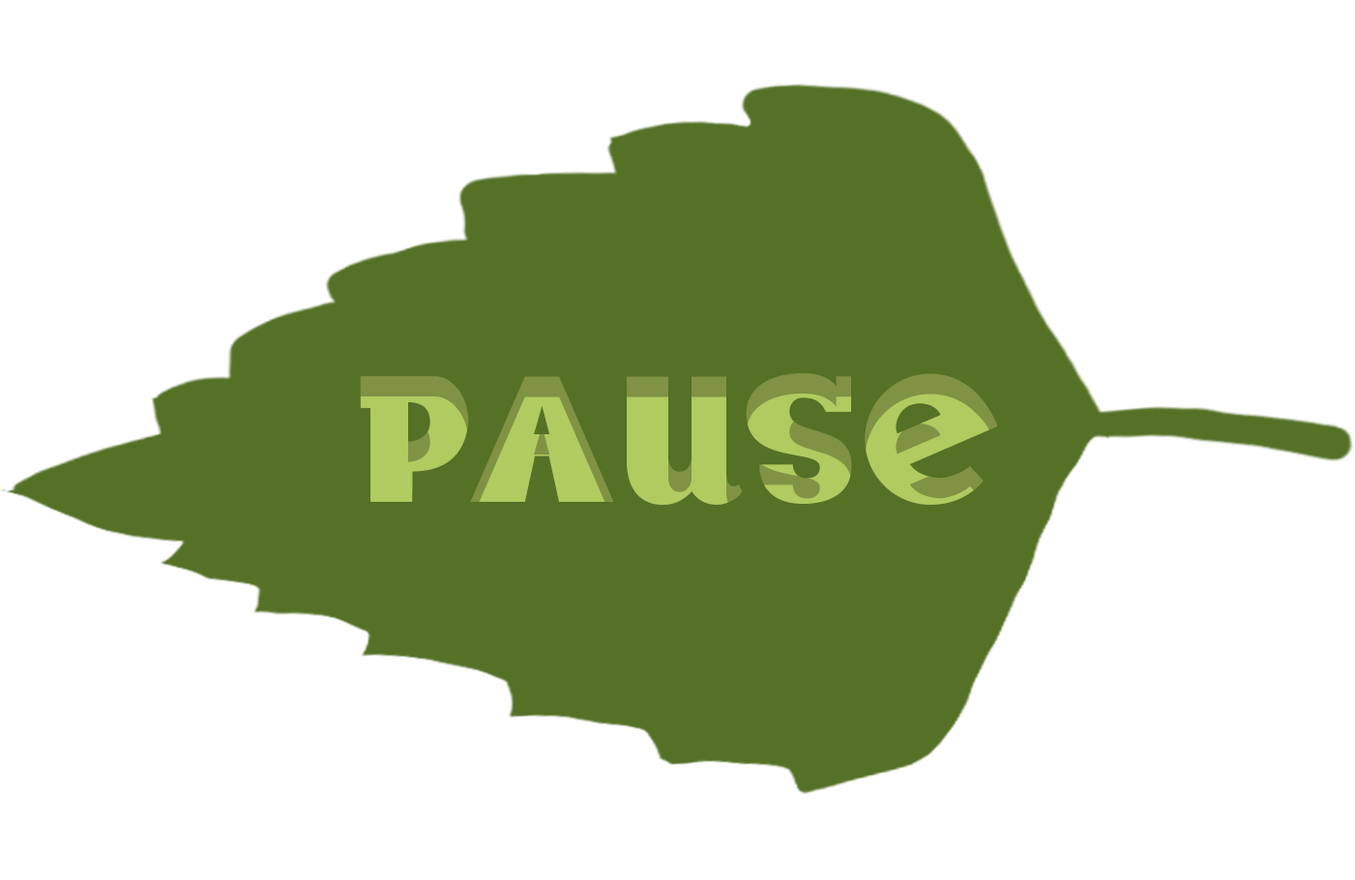
<style>
.page{position:relative;width:1355px;height:880px;background:#ffffff}
.page>*{position:absolute;margin:0}
.t1{font:174.5px "BadTyp-Regular";color:#b0cb60}
</style>
<div class="page">
<p class="t1" style="left:360px;top:372px;width:638px;height:134px">pause</p>
</div>
